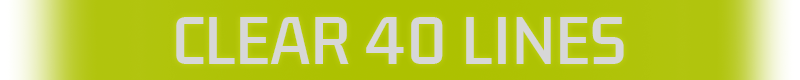
<style>
.page{position:relative;width:800px;height:80px}
.page>*{position:absolute;margin:0}
.t1{font:60px "KdamThmorPro-Regular";color:#d7d7d7}
</style>
<div class="page">
<p class="t1" style="left:176px;top:17px;width:448px;height:47px">CLEAR 40 LINES</p>
</div>
